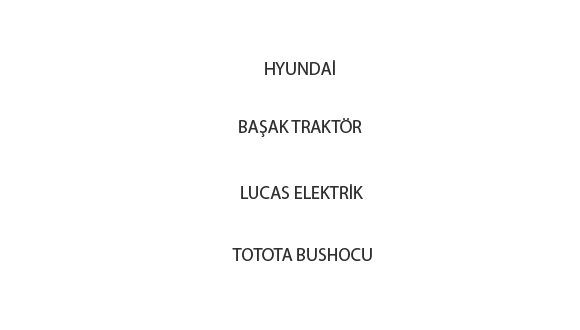
<style>
.page{position:relative;width:580px;height:330px;background:#ffffff}
.page>*{position:absolute;margin:0}
.t1{font:18px "MyriadPro-Regular";color:#313030}
</style>
<div class="page">
<p class="t1" style="left:265px;top:60px;width:70px;height:15px">HYUNDAİ</p>
<p class="t1" style="left:239px;top:118px;width:123px;height:19px">BAŞAK TRAKTÖR</p>
<p class="t1" style="left:241px;top:184px;width:122px;height:15px">LUCAS ELEKTRİK</p>
<p class="t1" style="left:232px;top:248px;width:140px;height:13px">TOTOTA BUSHOCU</p>
</div>
